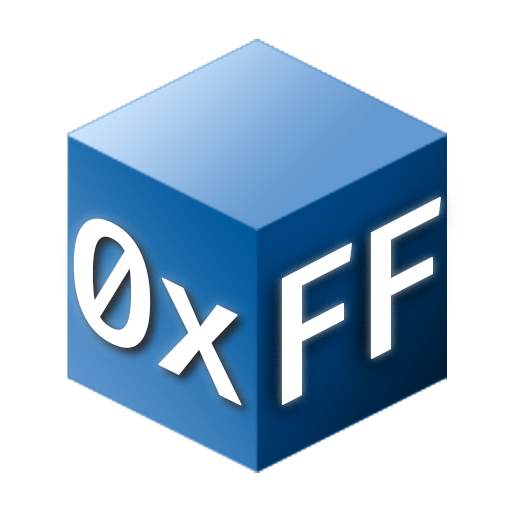
<style>
.page{position:relative;width:512px;height:512px;background:#ffffff}
.page>*{position:absolute;margin:0}
.t1{font:181.8px "FiraCode-Medium";letter-spacing:-0.075em;color:#ffffff;font-weight:bold}
.t2{font:166.5px "FiraCode-Medium";letter-spacing:-0.075em;color:#ffffff;font-weight:bold;scale:1.07 1}
</style>
<div class="page">
<p class="t1" style="left:281px;top:196px;width:160px;height:209px;rotate:-27deg">FF</p>
<p class="t2" style="left:73px;top:218px;width:169px;height:188px;rotate:26deg">0x</p>
</div>
